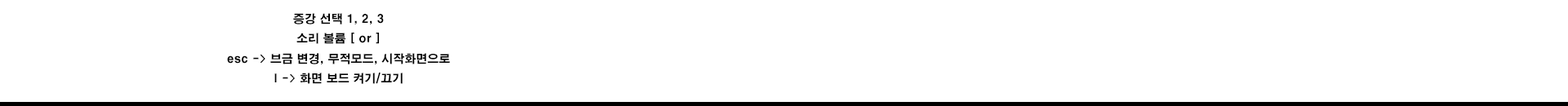
<style>
.page{position:relative;width:1568px;height:106px;background:#ffffff}
.page>*{position:absolute;margin:0}
.t1{font:11.4px "H2gtrE";color:#000000}
</style>
<div class="page">
<p class="t1" style="left:227px;top:13px;width:223px;height:71px;text-align:center">증강 선택 1, 2, 3<br>소리 볼륨 [ or ]<br>esc -&gt; 브금 변경, 무적모드, 시작화면으로<br>l -&gt; 화면 보드 켜기/끄기</p>
</div>
